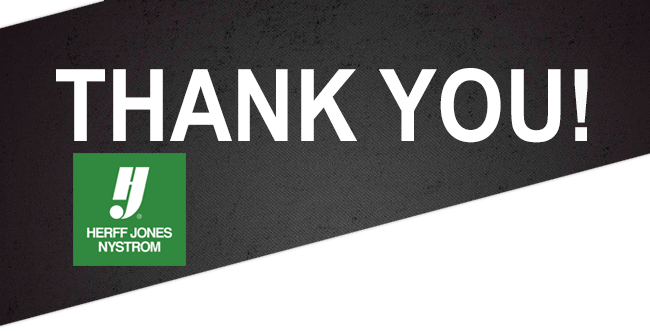
<style>
.page{position:relative;width:650px;height:331px;background:#ffffff}
.page>*{position:absolute;margin:0}
.t1{font:100px "Arial-BoldMT";color:#ffffff;scale:0.87 1}
.t2{font:100px "Arial-BoldMT";color:#fafafa;scale:0.87 1}
.t3{font:100px "Arial-BoldMT";color:#faf7c9;scale:0.87 1}
</style>
<div class="page">
<p class="t1" style="left:56px;top:68px;width:532px;height:75px;text-align:center">THANK YOU<span class="t2">!<br></span><span class="t3">YOU!</span></p>
</div>
